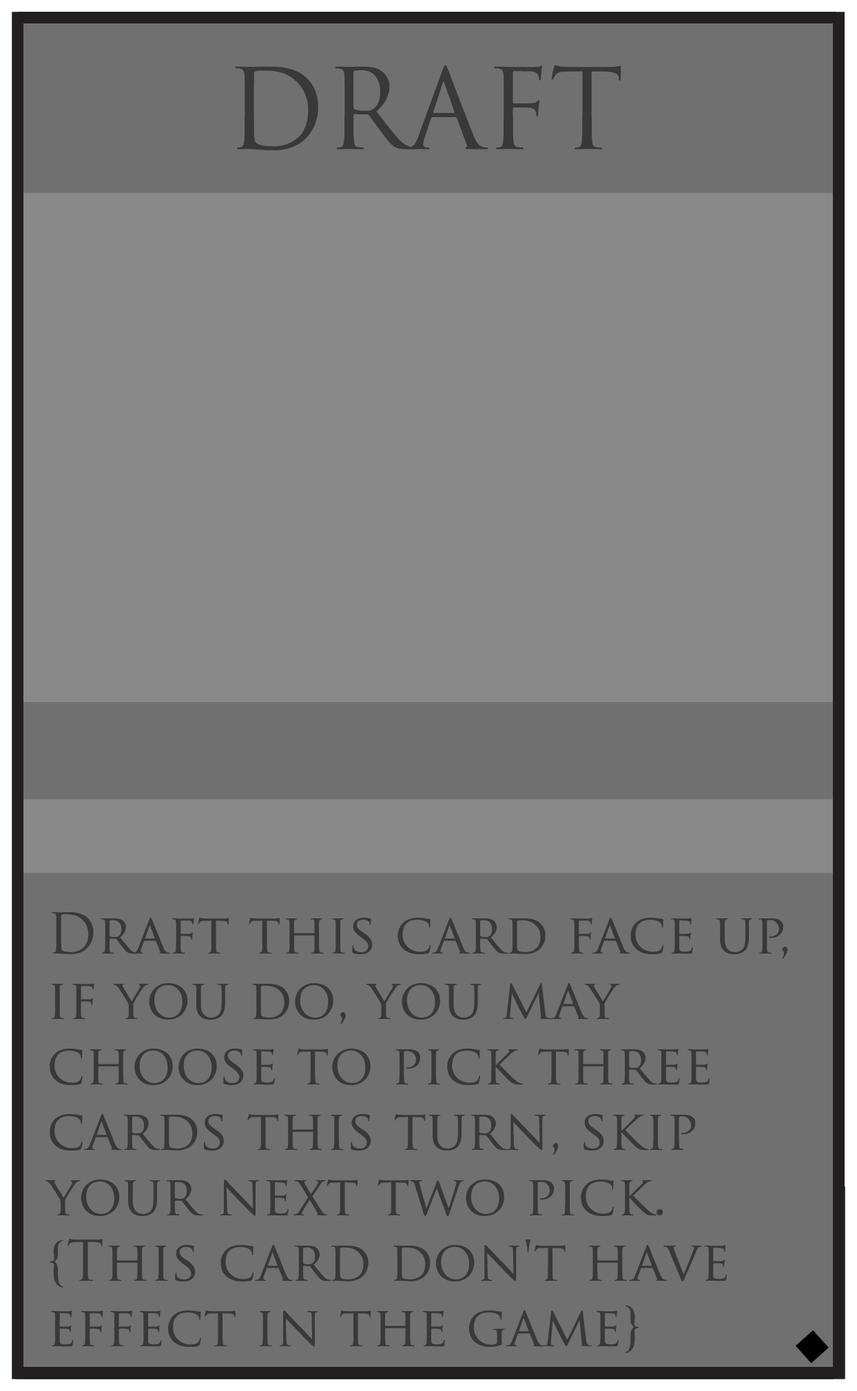
<style>
.page{position:relative;width:857px;height:1391px;background:#707070}
.page>*{position:absolute;margin:0}
.t1{font:109.1px "TrajanPro-Regular";color:#393939}
.t2{font:54.5px "TrajanPro-Regular";color:#393939}
</style>
<div class="page">
<p class="t1" style="left:235px;top:65px;width:387px;height:85px">DRAFT</p>
<p class="t2" style="left:45px;top:912px;width:743px;height:441px">Draft this card face up, <br>if you do, you may <br>choose to pick three <br>cards this turn, skip <br>your next two pick. <br>{This card don't have <br>effect in the game}</p>
</div>
